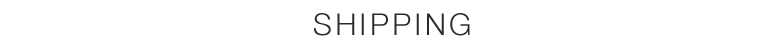
<style>
.page{position:relative;width:784px;height:47px;background:#ffffff}
.page>*{position:absolute;margin:0}
.t1{font:30px "HelveticaNeue-Light";letter-spacing:0.11em;color:#2a2a2a}
</style>
<div class="page">
<p class="t1" style="left:314px;top:13px;width:156px;height:23px">SHIPPING</p>
</div>
